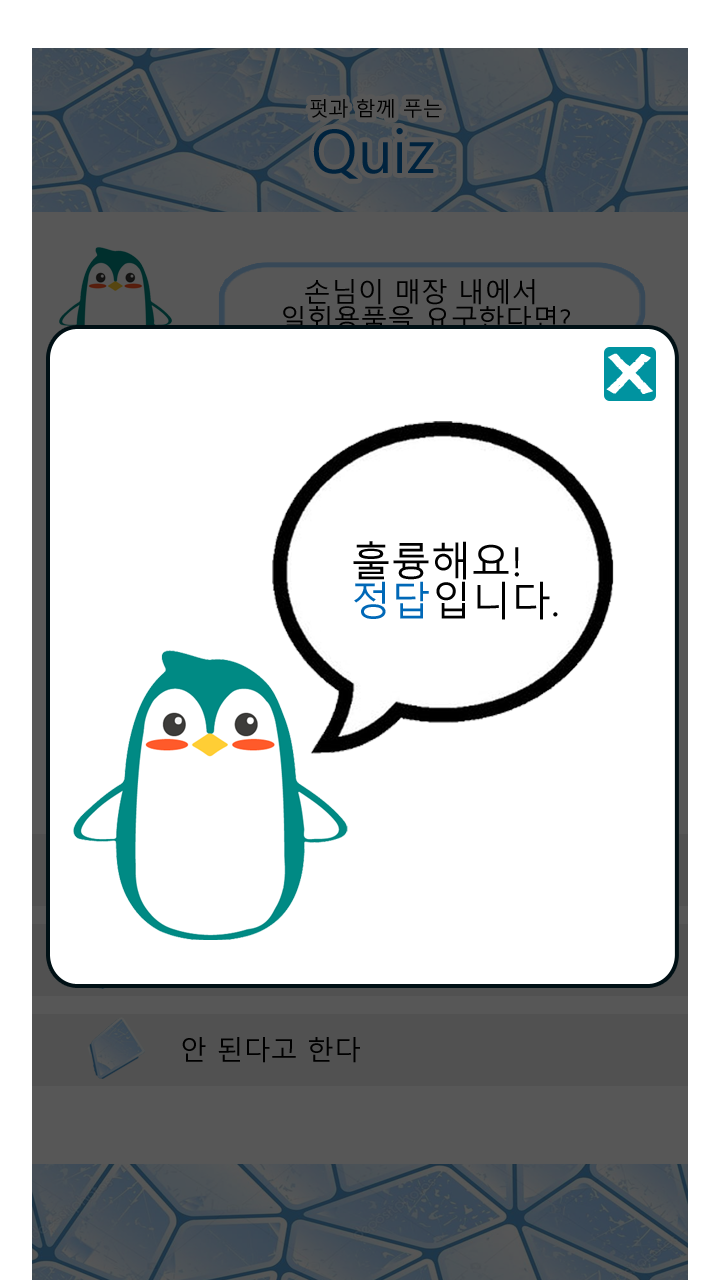
<style>
.page{position:relative;width:720px;height:1280px;background:#ffffff}
.page>*{position:absolute;margin:0}
.t1{font:20px/24px "MalgunGothic";color:#00233e}
.t2{font:20px/26px "MalgunGothic";color:#00233e}
.t3{font:60px/24px "MalgunGothic";color:#00233e}
.t4{font:27px/27px "MalgunGothic";color:#000000}
.t5{font:54.5px "H2mkpB";color:#ffffff;font-weight:bold;scale:1.3 1}
.t6{font:40px/40px "MalgunGothic";color:#000000}
.t7{font:40px/40px "MalgunGothic";color:#0068b7}
.t8{font:27px "MalgunGothic";color:#000000}
</style>
<div class="page">
<p class="t1" style="left:310px;top:99px;width:132px;height:80px;text-align:center"><span class="t2">  </span>펏과 함께 푸는 <br><span class="t3">Quiz</span></p>
<p class="t4" style="left:283px;top:279px;width:287px;height:53px;text-align:center">손님이 매장 내에서 <br>일회용품을 요구한다면?</p>
<p class="t5" style="left:606px;top:353px;width:47px;height:41px">X</p>
<p class="t6" style="left:353px;top:541px;width:205px;height:79px">훌륭해요!<br><span class="t7">정답</span>입니다.</p>
<p class="t8" style="left:182px;top:1037px;width:178px;height:26px">안 된다고 한다</p>
</div>
